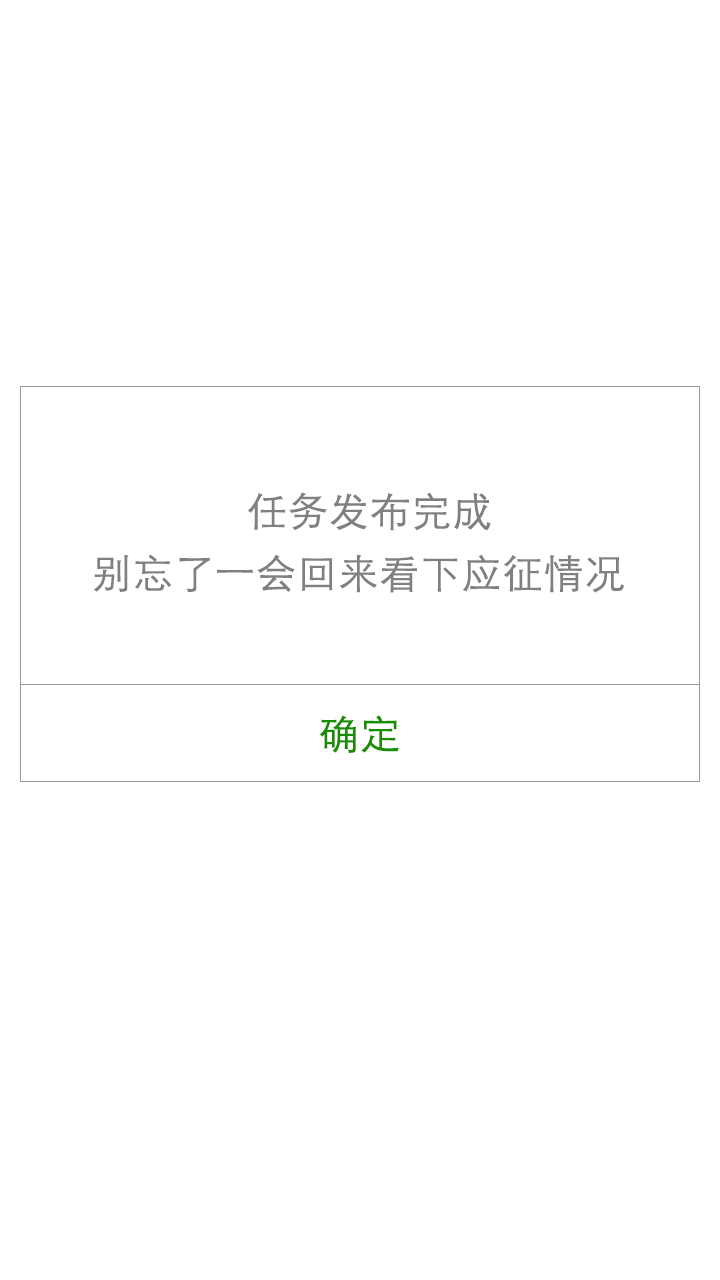
<style>
.page{position:relative;width:720px;height:1280px;background:#ffffff}
.page>*{position:absolute;margin:0}
.t1{font:40px/62px "STXihei";color:#808080;font-weight:bold}
.t2{font:40px/22px "STXihei";color:#808080;font-weight:bold}
.t3{font:40px "STXihei";color:#178d00;font-weight:bold}
</style>
<div class="page">
<p class="t1" style="left:94px;top:492px;width:530px;height:101px;text-align:justify"><span class="t2">              </span>任务发布完成<br>别忘了一会回来看下应征情况</p>
<p class="t3" style="left:320px;top:715px;width:79px;height:38px">确定</p>
</div>
